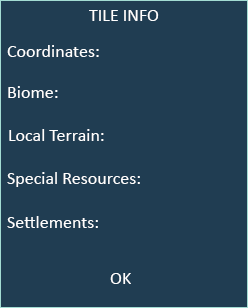
<style>
.page{position:relative;width:248px;height:308px;background:#203d52}
.page>*{position:absolute;margin:0}
.t1{font:18px "Calibri";color:#ffffff}
</style>
<div class="page">
<p class="t1" style="left:89px;top:10px;width:70px;height:11px">TILE INFO</p>
<p class="t1" style="left:7px;top:45px;width:92px;height:12px">Coordinates:</p>
<p class="t1" style="left:8px;top:86px;width:50px;height:12px">Biome:</p>
<p class="t1" style="left:9px;top:129px;width:95px;height:12px">Local Terrain:</p>
<p class="t1" style="left:7px;top:172px;width:133px;height:15px">Special Resources:</p>
<p class="t1" style="left:7px;top:216px;width:91px;height:12px">Settlements:</p>
<p class="t1" style="left:110px;top:273px;width:21px;height:11px">OK</p>
</div>
